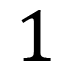
<style>
.page{position:relative;width:72px;height:72px;background:#ffffff}
.page>*{position:absolute;margin:0}
.t1{font:75px "CambriaMath";color:#000000}
</style>
<div class="page">
<p class="t1" style="left:21px;top:10px;width:30px;height:51px">1</p>
</div>
